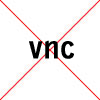
<style>
.page{position:relative;width:100px;height:100px;background:#ffffff}
.page>*{position:absolute;margin:0}
.t1{font:31.9px "BellGothicStd-Bold";color:#000000;font-weight:bold}
</style>
<div class="page">
<p class="t1" style="left:29px;top:40px;width:45px;height:19px">vnc</p>
</div>
